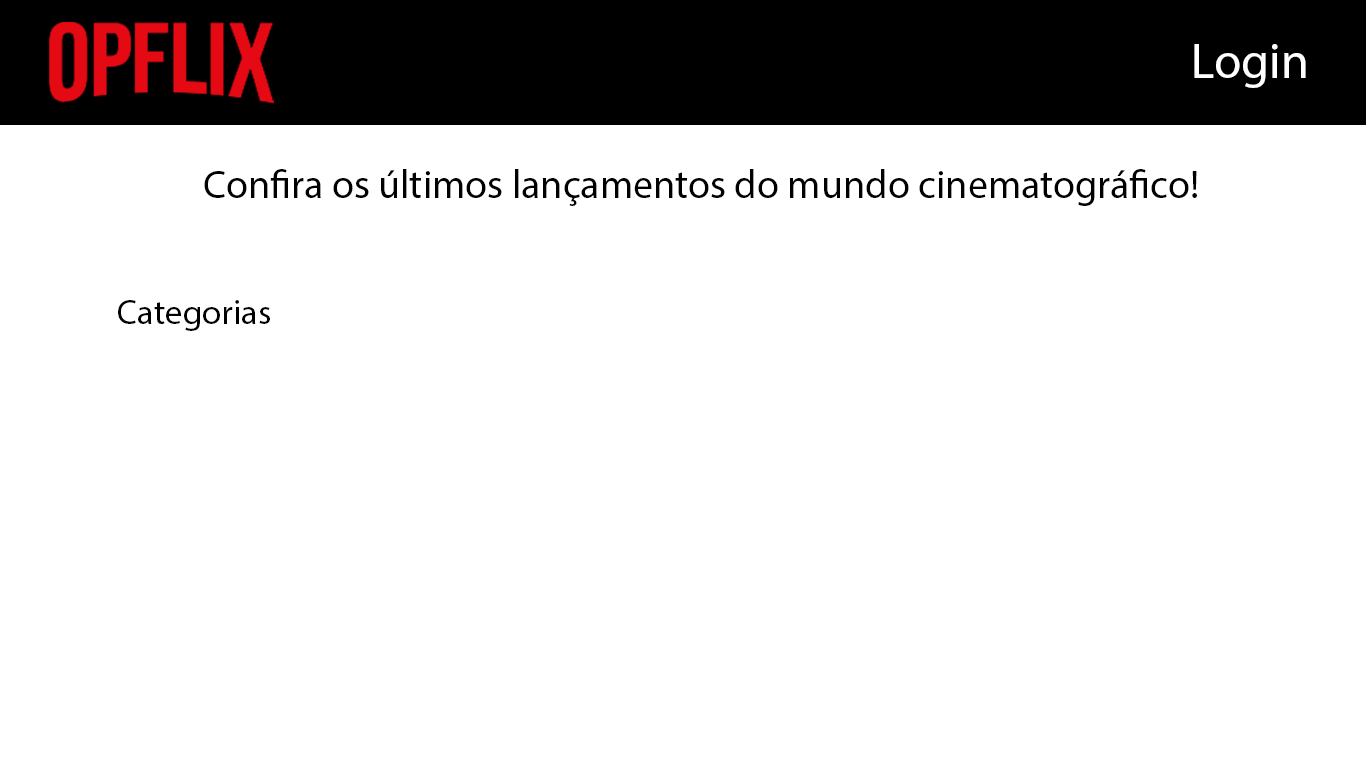
<style>
.page{position:relative;width:1366px;height:768px;background:#ffffff}
.page>*{position:absolute;margin:0}
.t1{font:50px "MyriadPro-Regular";color:#ffffff}
.t2{font:40px "MyriadPro-Regular";color:#000000}
.t3{font:35px "MyriadPro-Regular";color:#000000}
</style>
<div class="page">
<p class="t1" style="left:1194px;top:44px;width:112px;height:44px">Login</p>
<p class="t2" style="left:204px;top:169px;width:993px;height:37px">Confira os últimos lançamentos do mundo cinematográfico!</p>
<p class="t3" style="left:118px;top:300px;width:152px;height:31px">Categorias</p>
</div>
